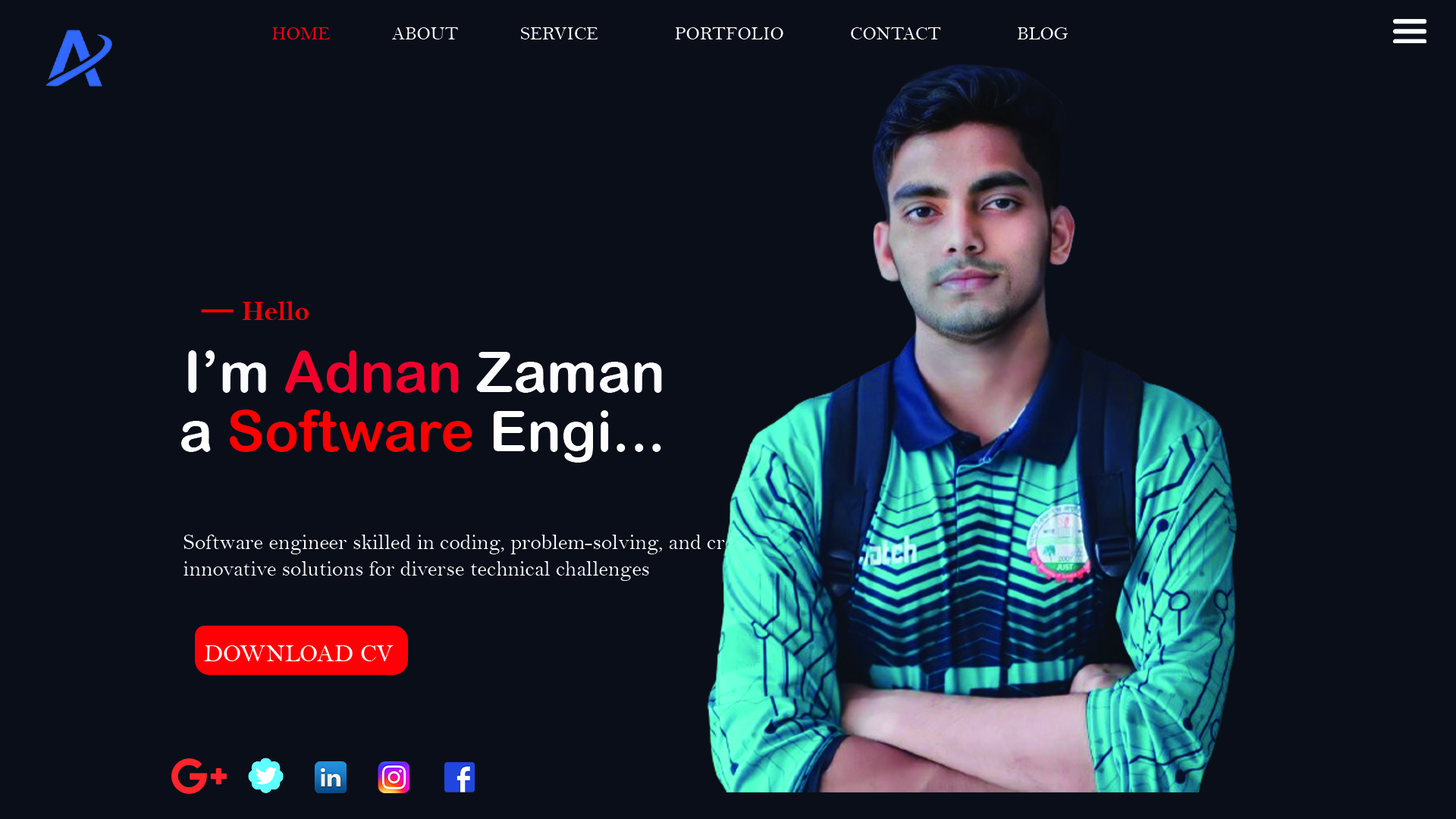
<style>
.page{position:relative;width:1456px;height:819px;background:#0a0e18}
.page>*{position:absolute;margin:0}
.t1{font:19px "BellMT";color:#feffff}
.t2{font:19px "BellMT";color:#ff0007}
.t3{font:28.4px "BellMTBold";color:#f20000}
.t4{font:63.2px "BellMTBold";color:#f20000}
.t5{font:56.9px "ArialRoundedMTBold";color:#f3002b}
.t6{font:56.9px "ArialRoundedMTBold";color:#fafbfc}
.t7{font:56.9px "ArialRoundedMTBold";color:#fcfbfd}
.t8{font:56.9px "ArialRoundedMTBold";color:#ff0000}
.t9{font:56.9px "ArialRoundedMTBold";color:#ffffff}
.t10{font:22.1px "BellMT";color:#fafcfc}
.t11{font:25.3px "BellMT";color:#ffffff}
</style>
<div class="page">
<p class="t1" style="left:272px;top:27px;width:796px;height:12px"><span class="t2">HOME             </span>ABOUT             SERVICE                PORTFOLIO              CONTACT                BLOG</p>
<p class="t3" style="left:242px;top:301px;width:67px;height:19px">Hello</p>
<p class="t4" style="left:201px;top:309px;width:33px;height:3px">_</p>
<p class="t5" style="left:188px;top:350px;width:474px;height:43px"><span class="t6">I’m </span>Adnan <span class="t7">Zaman</span></p>
<p class="t8" style="left:181px;top:409px;width:480px;height:54px"><span class="t9">a </span>Software<span class="t9"> Engi...</span></p>
<p class="t10" style="left:184px;top:535px;width:596px;height:46px">Software engineer skilled in coding, problem-solving, and creating innovative solutions for diverse technical challenges</p>
<p class="t11" style="left:204px;top:645px;width:190px;height:16px">DOWNLOAD CV</p>
</div>
